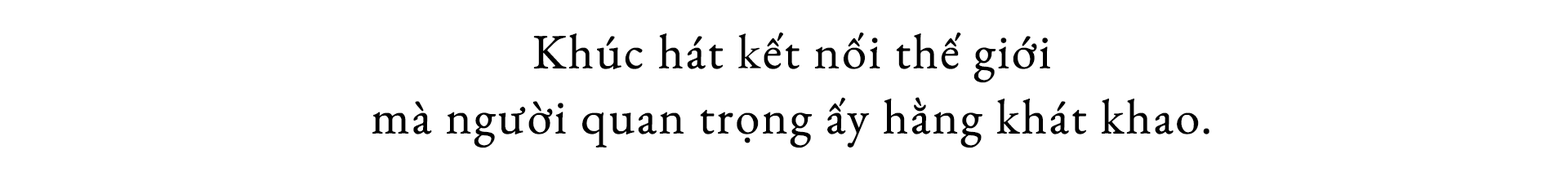
<style>
.page{position:relative;width:1568px;height:176px;background:#ffffff}
.page>*{position:absolute;margin:0}
.t1{font:49px "EBGaramond-Regular";letter-spacing:0.02em;color:#000000;font-weight:bold}
</style>
<div class="page">
<p class="t1" style="left:372px;top:32px;width:837px;height:117px;text-align:center">Khúc hát kết nối thế giới <br>mà người quan trọng ấy hằng khát khao.</p>
</div>
